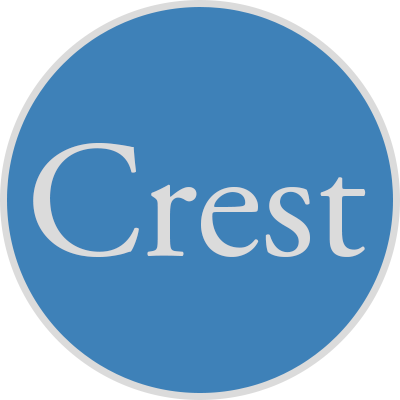
<style>
.page{position:relative;width:400px;height:400px;background:#3e81b8}
.page>*{position:absolute;margin:0}
.t1{font:167px "AGaramondPro-Regular";color:#dbdbdb}
</style>
<div class="page">
<p class="t1" style="left:33px;top:143px;width:333px;height:114px">Crest</p>
</div>
